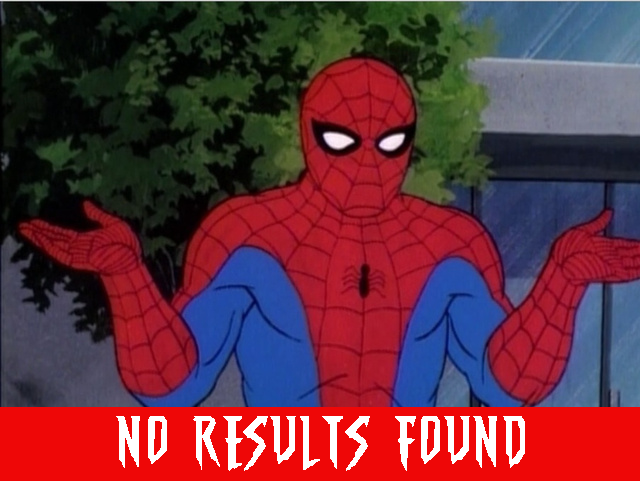
<style>
.page{position:relative;width:640px;height:481px}
.page>*{position:absolute;margin:0}
.t1{font:54.7px "THEAMAZINGSPIDER-MAN";color:#ffffff}
</style>
<div class="page">
<p class="t1" style="left:116px;top:416px;width:409px;height:55px">NO RESULTS FOUND</p>
</div>
